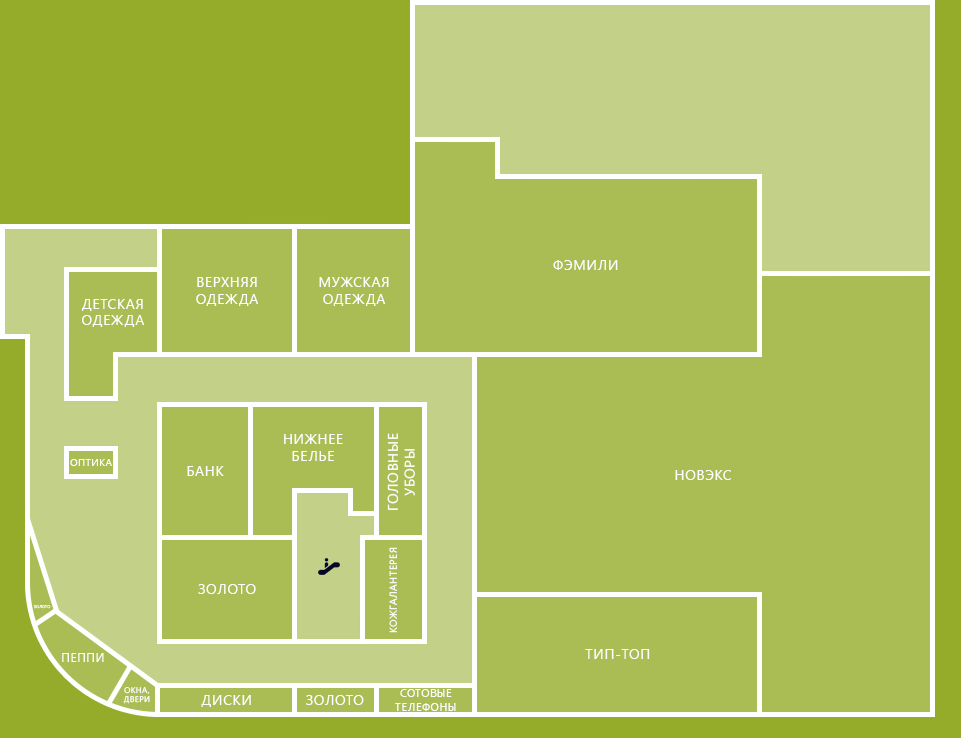
<style>
.page{position:relative;width:961px;height:738px;background:#a9bd54}
.page>*{position:absolute;margin:0}
.t1{font:14px "SegoeUI";letter-spacing:0.05em;color:#ffffff;text-transform:uppercase}
.t2{font:10px "SegoeUI";letter-spacing:0.05em;color:#ffffff;text-transform:uppercase}
.t3{font:4px "SegoeUI";letter-spacing:0.05em;color:#ffffff;text-transform:uppercase}
.t4{font:12px "SegoeUI";letter-spacing:0.05em;color:#ffffff;text-transform:uppercase}
.t5{font:8px "SegoeUI";letter-spacing:0.05em;color:#ffffff;text-transform:uppercase}
.t6{font:11px "SegoeUI";letter-spacing:0.05em;color:#ffffff;text-transform:uppercase}
</style>
<div class="page">
<p class="t1" style="left:553px;top:260px;width:65px;height:10px">Фэмили</p>
<p class="t1" style="left:196px;top:277px;width:63px;height:29px;text-align:center">Верхняя<br>одежда</p>
<p class="t1" style="left:319px;top:277px;width:70px;height:29px;text-align:center">Мужская<br>одежда</p>
<p class="t1" style="left:82px;top:299px;width:63px;height:28px;text-align:center">Детская<br>одежда</p>
<p class="t1" style="left:284px;top:434px;width:59px;height:27px;text-align:center">Нижнее<br>белье</p>
<p class="t1" style="left:387px;top:433px;width:28px;height:77px;text-align:center;rotate:-90deg">Головные<br>уборы</p>
<p class="t2" style="left:70px;top:459px;width:42px;height:7px">Оптика</p>
<p class="t1" style="left:187px;top:466px;width:37px;height:10px">Банк</p>
<p class="t1" style="left:675px;top:470px;width:56px;height:10px">Новэкс</p>
<p class="t2" style="left:389px;top:547px;width:8px;height:86px;rotate:-90deg">Кожгалантерея</p>
<p class="t1" style="left:198px;top:584px;width:58px;height:10px">Золото</p>
<p class="t3" style="left:33px;top:605px;width:18px;height:4px">Золото</p>
<p class="t4" style="left:62px;top:653px;width:42px;height:9px">Пеппи</p>
<p class="t1" style="left:585px;top:649px;width:65px;height:10px">Тип-топ</p>
<p class="t5" style="left:123px;top:687px;width:27px;height:17px;text-align:center">Окна,<br>двери</p>
<p class="t6" style="left:395px;top:689px;width:61px;height:22px;text-align:center">Сотовые<br>телефоны</p>
<p class="t1" style="left:201px;top:695px;width:50px;height:12px">Диски</p>
<p class="t1" style="left:306px;top:695px;width:58px;height:10px">Золото</p>
</div>
